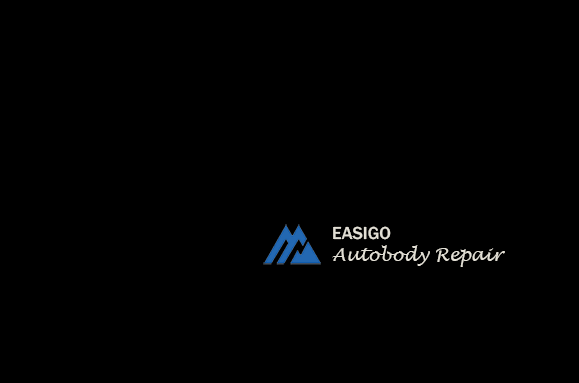
<style>
.page{position:relative;width:579px;height:383px;background:#000000}
.page>*{position:absolute;margin:0}
.t1{font:18px "LucidaHandwriting-Italic";color:#e2dfd5}
.t2{font:18px "FranklinGothic-Medium";color:#e2dfd5}
</style>
<div class="page">
<p class="t1" style="left:332px;top:226px;width:173px;height:41px"><span class="t2">EASIGO<br></span>Autobody Repair</p>
</div>
